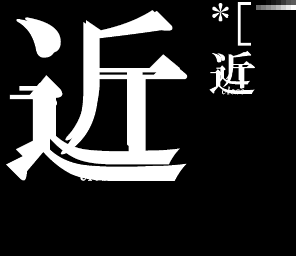
<style>
.page{position:relative;width:296px;height:256px;background:#000000}
.page>*{position:absolute;margin:0}
.t1{font:16px/30px "HGMinchoB";letter-spacing:-0.025em;color:#ffffff;font-style:italic}
.t2{font:172px/30px "HGMinchoB";letter-spacing:0.01em;color:#ffffff}
.t3{font:16px/20.8px "HGMinchoB";letter-spacing:-0.025em;color:#ffffff;font-style:italic}
.t4{font:10px/13px "HGMinchoB";letter-spacing:-0.01em;color:#ffffff;font-style:italic}
.t5{font:36px/13px "HGMinchoB";letter-spacing:0.01em;color:#ffffff}
</style>
<div class="page">
<p class="t1" style="left:16px;top:10px;width:164px;height:171px;text-align:center"><span class="t2">近<br></span> close<span class="t3">.</span></p>
<p class="t4" style="left:216px;top:52px;width:34px;height:43px;text-align:center"><span class="t5">近<br> </span>close.</p>
</div>
